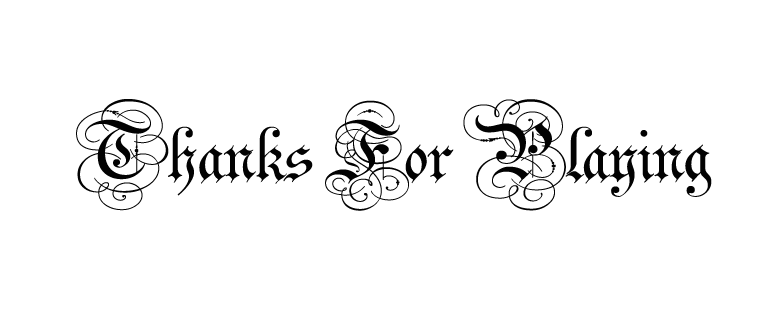
<style>
.page{position:relative;width:769px;height:309px;background:#ffffff}
.page>*{position:absolute;margin:0}
.t1{font:128px "Parchment-Regular";color:#020202}
</style>
<div class="page">
<p class="t1" style="left:76px;top:99px;width:636px;height:112px">Thanks For Playing</p>
</div>
